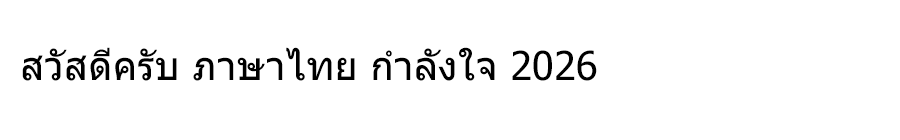
<style>
.page{position:relative;width:900px;height:140px;background:#ffffff}
.page>*{position:absolute;margin:0}
.t1{font:40px "Tahoma";color:#000000}
</style>
<div class="page">
<p class="t1" style="left:22px;top:47px;width:575px;height:34px">สวัสดีครับ ภาษาไทย กำลังใจ 2026</p>
</div>
